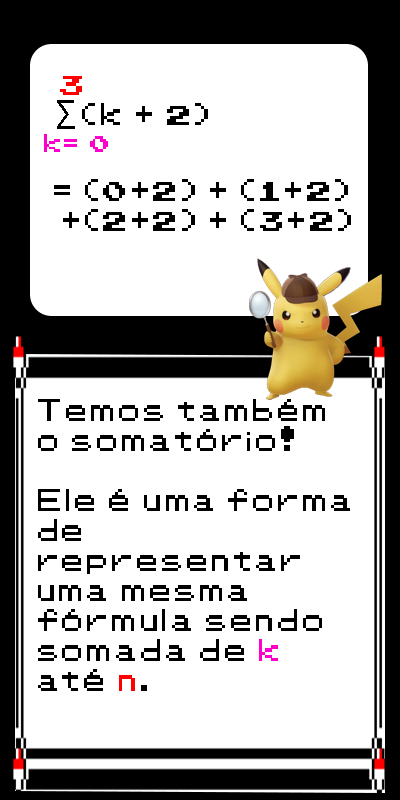
<style>
.page{position:relative;width:400px;height:800px;background:#ffffff}
.page>*{position:absolute;margin:0}
.t1{font:25px "Pokemon-Classic";color:#ff0000}
.t2{font:25px "Pokemon-Classic";color:#000000}
.t3{font:37.5px "MyriadPro-Regular";color:#000000}
.t4{font:20.8px "Pokemon-Classic";color:#ff00cc}
.t5{font:25px "Pokemon-Classic";color:#010000}
.t6{font:25px "Pokemon-Classic";color:#ff00cc}
</style>
<div class="page">
<p class="t1" style="left:60px;top:76px;width:22px;height:19px">3</p>
<p class="t2" style="left:57px;top:100px;width:151px;height:29px"><span class="t3">∑ </span>(k + 2)</p>
<p class="t4" style="left:44px;top:134px;width:64px;height:18px">k= 0</p>
<p class="t5" style="left:54px;top:179px;width:297px;height:52px">= (0+2) + (1+2)<br> +(2+2) + (3+2)</p>
<p class="t2" style="left:38px;top:399px;width:312px;height:292px">Temos também <br>o somatório!<br><br>Ele é uma forma <br>de <br>representar<br>uma mesma <br>fórmula sendo <br>somada de <span class="t6">k</span> <br>até <span class="t1">n</span>.</p>
</div>
